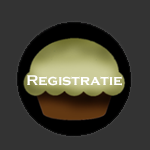
<style>
.page{position:relative;width:150px;height:150px;background:#333333}
.page>*{position:absolute;margin:0}
.t1{font:14.7px "CopperplateGothic-Bold";color:#ffffff}
</style>
<div class="page">
<p class="t1" style="left:27px;top:75px;width:95px;height:11px">Registratie</p>
</div>
